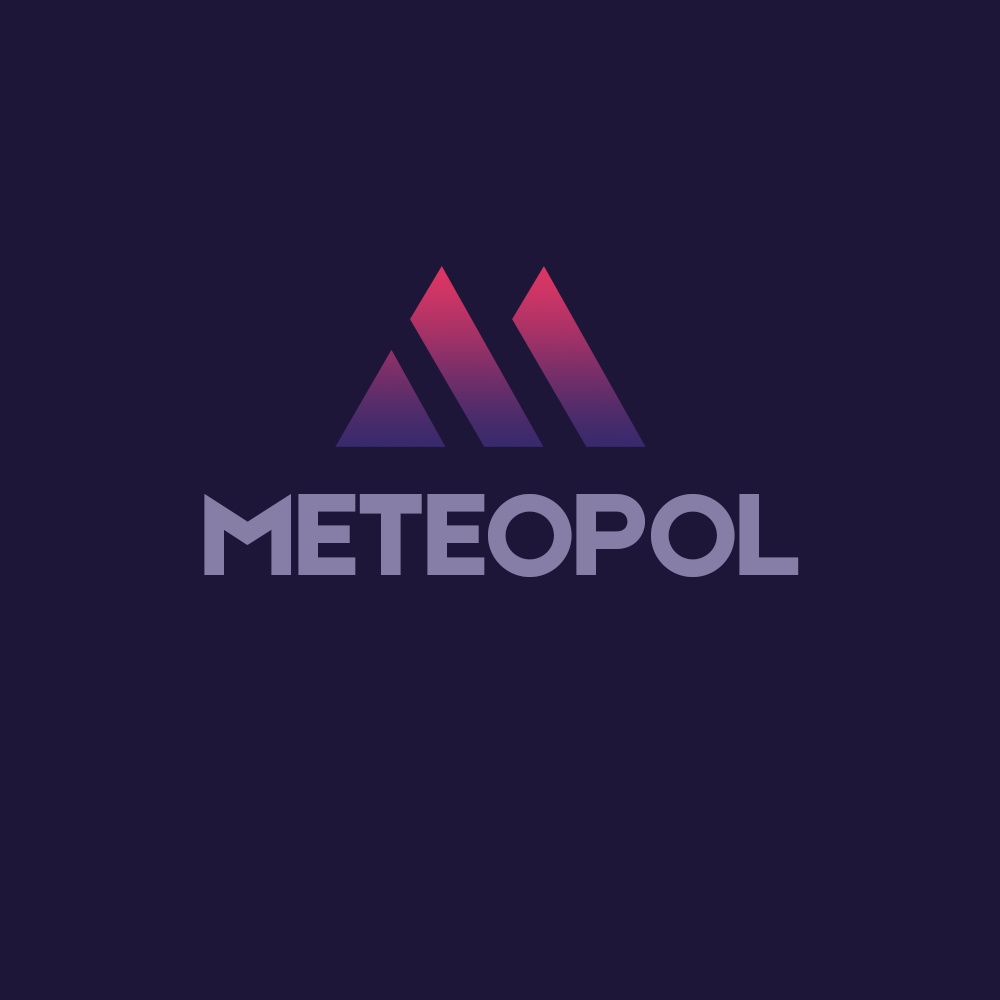
<style>
.page{position:relative;width:1000px;height:1000px;background:#1e1638}
.page>*{position:absolute;margin:0}
.t1{font:125px "Etna";color:#877ea8}
</style>
<div class="page">
<p class="t1" style="left:204px;top:494px;width:595px;height:83px">METEOPOL</p>
</div>
